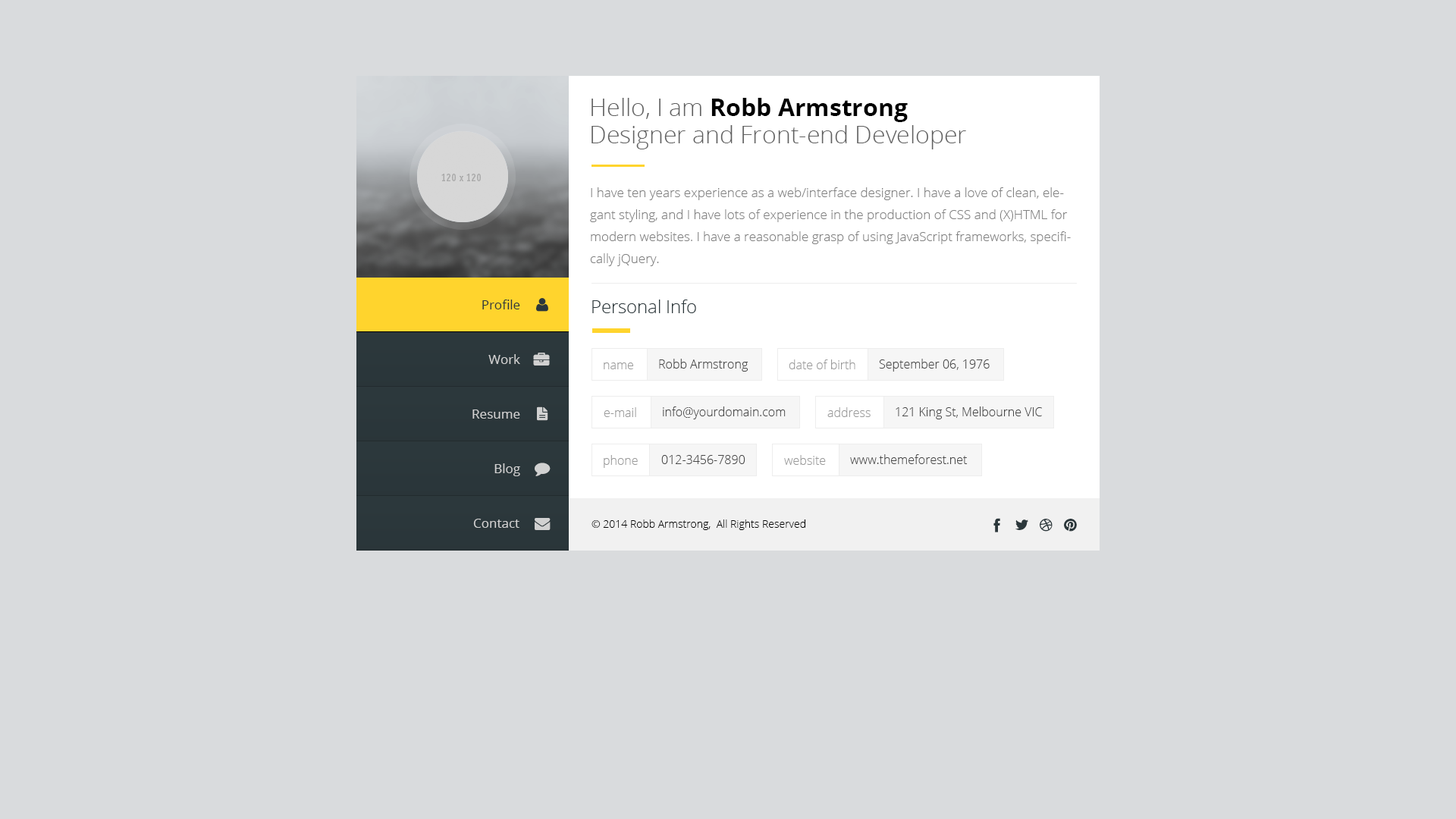
<style>
.page{position:relative;width:1456px;height:819px;background:#d9dbdd}
.page>*{position:absolute;margin:0}
.t1{font:24.3px/27.3px "OpenSans-Light";color:#606060}
.t2{font:24.3px/27.3px "OpenSans-Bold";color:#000000}
.t3{font:12.9px/22px "OpenSans-Light";color:#828282}
.t4{font:12.9px "OpenSans";color:#2c383c}
.t5{font:18.2px "OpenSans-Light";color:#2c383c}
.t6{font:12.9px "OpenSans";color:#d1d1d1}
.t7{font:12.1px "OpenSans-Light";color:#9b9b9b}
.t8{font:12.1px "OpenSans-Light";color:#484848}
.t9{font:10.6px "OpenSans-Light";color:#000000}
</style>
<div class="page">
<p class="t1" style="left:591px;top:98px;width:375px;height:51px">Hello, I am <span class="t2">Robb Armstrong<br></span>Designer and Front-end Developer</p>
<p class="t3" style="left:590px;top:187px;width:481px;height:79px">I have ten years experience as a web/interface designer. I have a love of clean, elegant styling, and I have lots of experience in the production of CSS and (X)HTML for modern websites. I have a reasonable grasp of using JavaScript frameworks, specifically jQuery.</p>
<p class="t4" style="left:482px;top:300px;width:38px;height:9px">Profile</p>
<p class="t5" style="left:592px;top:300px;width:104px;height:13px">Personal Info</p>
<p class="t6" style="left:488px;top:354px;width:32px;height:10px">Work</p>
<p class="t7" style="left:604px;top:362px;width:29px;height:7px">name</p>
<p class="t8" style="left:659px;top:359px;width:89px;height:13px">Robb Armstrong</p>
<p class="t7" style="left:789px;top:359px;width:66px;height:10px">date of birth</p>
<p class="t8" style="left:879px;top:359px;width:111px;height:13px">September 06, 1976</p>
<p class="t6" style="left:472px;top:409px;width:48px;height:10px">Resume</p>
<p class="t7" style="left:604px;top:407px;width:32px;height:10px">e-mail</p>
<p class="t8" style="left:663px;top:406px;width:123px;height:13px">info@yourdomain.com</p>
<p class="t7" style="left:827px;top:407px;width:44px;height:10px">address</p>
<p class="t8" style="left:896px;top:406px;width:146px;height:13px">121 King St, Melbourne VIC</p>
<p class="t7" style="left:604px;top:455px;width:34px;height:13px">phone</p>
<p class="t8" style="left:661px;top:455px;width:84px;height:9px">012-3456-7890</p>
<p class="t7" style="left:784px;top:455px;width:42px;height:10px">website</p>
<p class="t8" style="left:850px;top:454px;width:118px;height:10px">www.themeforest.net</p>
<p class="t6" style="left:494px;top:463px;width:26px;height:13px">Blog</p>
<p class="t6" style="left:473px;top:519px;width:46px;height:9px">Contact</p>
<p class="t9" style="left:591px;top:519px;width:214px;height:11px">© 2014 Robb Armstrong,  All Rights Reserved</p>
</div>
